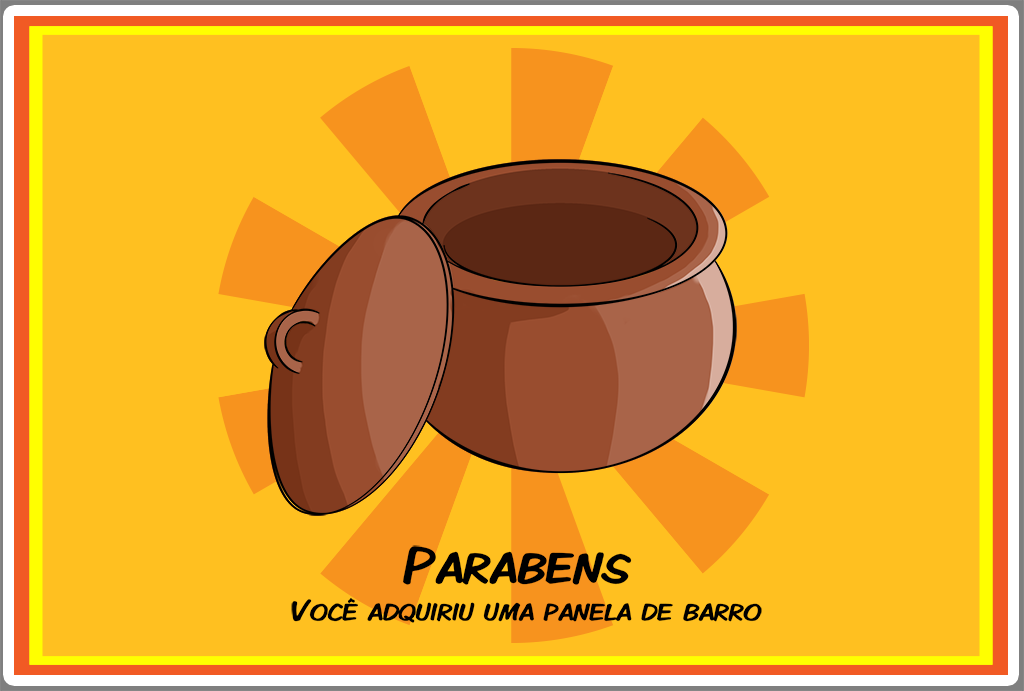
<style>
.page{position:relative;width:1024px;height:691px;background:#ffc020}
.page>*{position:absolute;margin:0}
.t1{font:29.6px/37.8px "KomikaDisplayKaps";color:#000000}
.t2{font:53.4px/37.8px "KomikaDisplayKaps";color:#000000}
</style>
<div class="page">
<p class="t1" style="left:291px;top:545px;width:471px;height:78px;text-align:center"><span class="t2">Parabens <br></span>Você adquiriu uma panela de barro</p>
</div>
